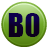
<style>
.page{position:relative;width:48px;height:48px;background:#ffffff}
.page>*{position:absolute;margin:0}
.t1{font:30px "Impact"}
</style>
<div class="page">
<p class="t1" style="left:8px;top:13px;width:32px;height:24px">B0</p>
</div>
